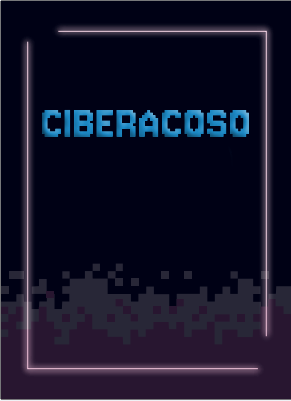
<style>
.page{position:relative;width:291px;height:401px;background:#000115}
.page>*{position:absolute;margin:0}
.t1{font:50px "Jersey10-Regular";letter-spacing:0.025em}
</style>
<div class="page">
<p class="t1" style="left:42px;top:109px;width:207px;height:28px">CIBERACOSO</p>
</div>
